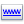
<style>
.page{position:relative;width:24px;height:24px;background:#ffffff}
.page>*{position:absolute;margin:0}
.t1{font:9.7px "Calibri";letter-spacing:-0.12em;color:#0000ff}
</style>
<div class="page">
<p class="t1" style="left:2px;top:9px;width:19px;height:5px">www</p>
</div>
